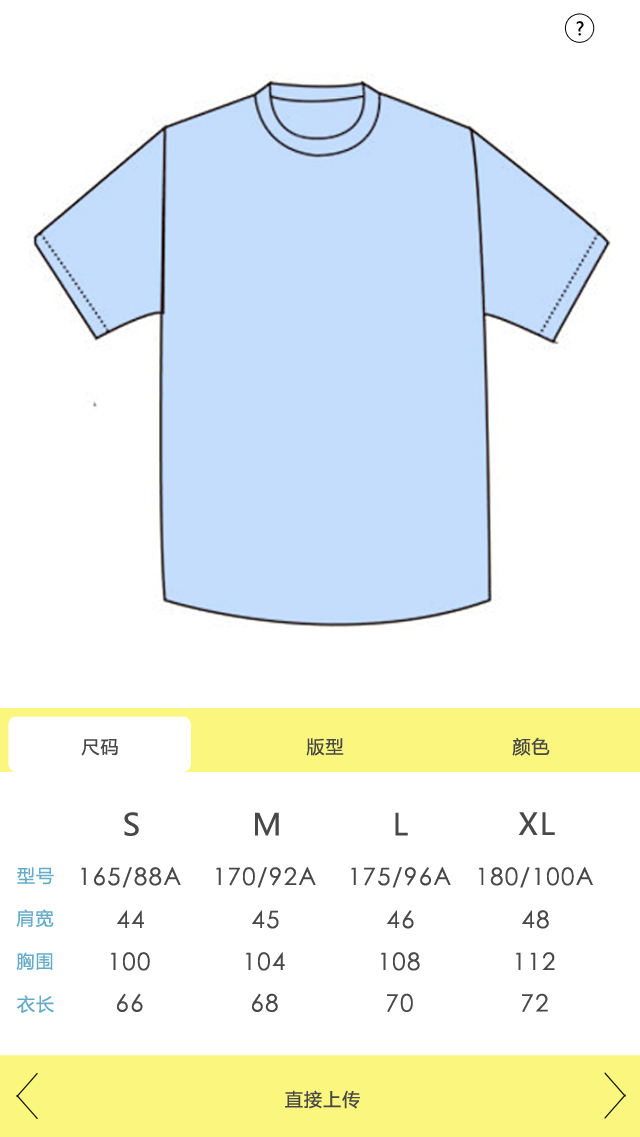
<style>
.page{position:relative;width:640px;height:1137px;background:#ffffff}
.page>*{position:absolute;margin:0}
.t1{font:18px "MicrosoftYaHei";letter-spacing:0.06em;color:#000000}
.t2{font:18px "MicrosoftYaHei";letter-spacing:0.06em;color:#484848}
.t3{font:30px "MicrosoftYaHei";letter-spacing:0.06em;color:#484848}
.t4{font:18px "MicrosoftYaHei";letter-spacing:0.06em;color:#65acc7}
.t5{font:24px "MicrosoftYaHei";letter-spacing:0.06em;color:#65acc7}
.t6{font:24px "STXihei";letter-spacing:0.06em;color:#484848}
</style>
<div class="page">
<p class="t1" style="left:576px;top:21px;width:8px;height:15px">?</p>
<p class="t2" style="left:512px;top:737px;width:38px;height:19px">颜色</p>
<p class="t2" style="left:81px;top:739px;width:37px;height:17px">尺码</p>
<p class="t2" style="left:306px;top:738px;width:38px;height:18px">版型</p>
<p class="t3" style="left:124px;top:812px;width:15px;height:24px">S</p>
<p class="t3" style="left:255px;top:812px;width:24px;height:24px">M</p>
<p class="t3" style="left:395px;top:812px;width:13px;height:24px">L</p>
<p class="t3" style="left:518px;top:812px;width:37px;height:23px">XL</p>
<p class="t4" style="left:17px;top:867px;width:37px;height:18px"><span class="t5"><br></span>型号</p>
<p class="t6" style="left:81px;top:867px;width:100px;height:21px">165/88A</p>
<p class="t6" style="left:216px;top:867px;width:100px;height:21px">170/92A</p>
<p class="t6" style="left:351px;top:867px;width:100px;height:21px">175/96A</p>
<p class="t6" style="left:478px;top:867px;width:115px;height:21px">180/100A</p>
<p class="t4" style="left:16px;top:909px;width:38px;height:18px">肩宽</p>
<p class="t6" style="left:117px;top:910px;width:27px;height:18px">44</p>
<p class="t6" style="left:252px;top:910px;width:27px;height:19px">45</p>
<p class="t6" style="left:387px;top:910px;width:27px;height:19px">46</p>
<p class="t6" style="left:522px;top:910px;width:27px;height:19px">48</p>
<p class="t4" style="left:16px;top:952px;width:37px;height:18px">胸围</p>
<p class="t6" style="left:110px;top:952px;width:40px;height:19px">100</p>
<p class="t6" style="left:245px;top:952px;width:40px;height:19px">104</p>
<p class="t6" style="left:380px;top:952px;width:40px;height:19px">108</p>
<p class="t6" style="left:515px;top:952px;width:40px;height:18px">112</p>
<p class="t4" style="left:17px;top:995px;width:37px;height:18px">衣长</p>
<p class="t6" style="left:117px;top:993px;width:26px;height:19px">66</p>
<p class="t6" style="left:252px;top:993px;width:26px;height:19px">68</p>
<p class="t6" style="left:387px;top:993px;width:26px;height:19px">70</p>
<p class="t6" style="left:522px;top:993px;width:26px;height:19px">72</p>
<p class="t2" style="left:285px;top:1090px;width:75px;height:19px">直接上传</p>
</div>
